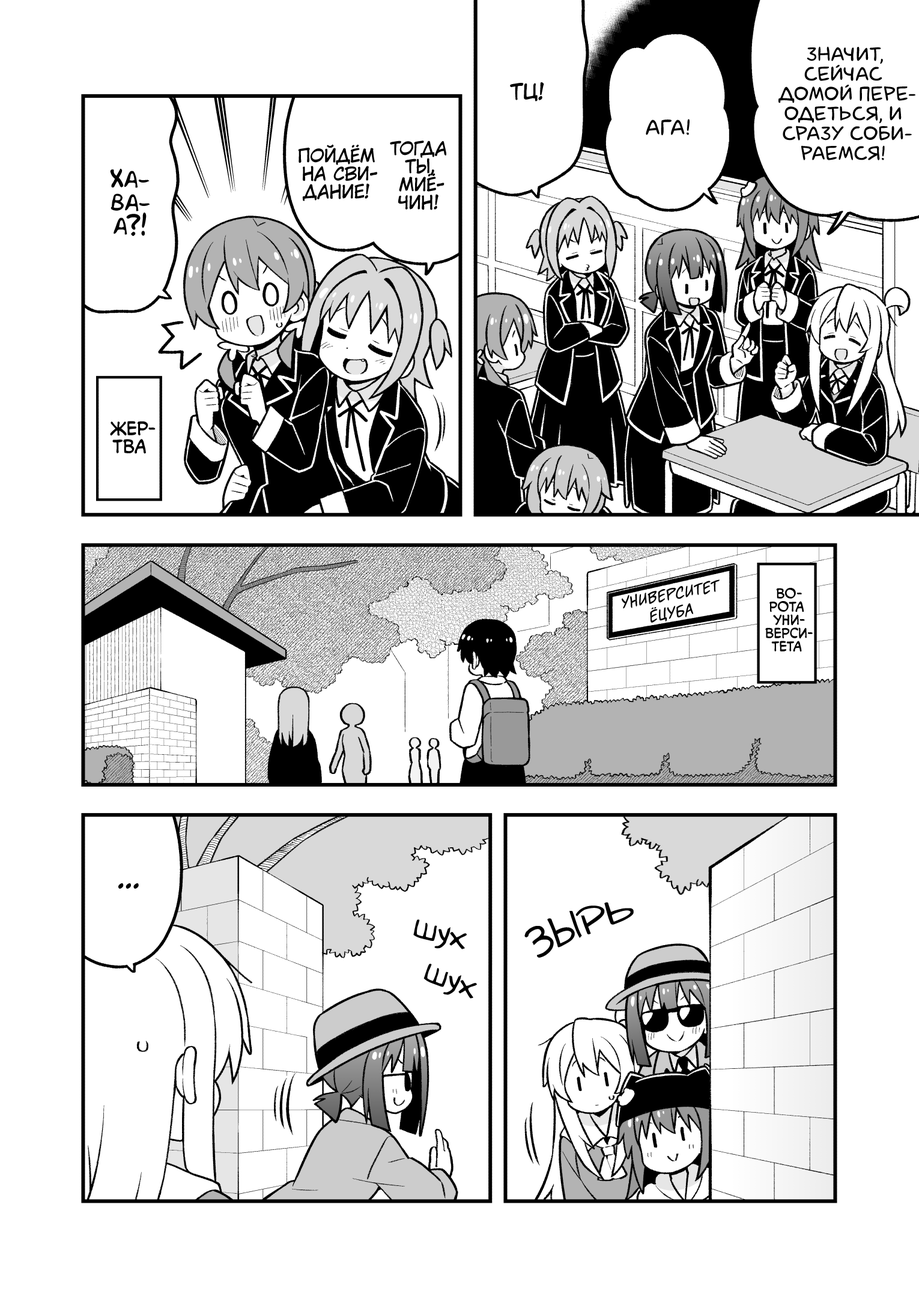
<style>
.page{position:relative;width:919px;height:1297px;background:#ffffff}
.page>*{position:absolute;margin:0}
.t1{font:19.8px "laCartoonerie";color:#000000;text-transform:uppercase}
.t2{font:21.6px "KuraiVoice2";color:#000000;text-transform:uppercase}
.t3{font:21.6px "laCartoonerie";color:#000000;text-transform:uppercase}
.t4{font:18px "KuraiVoice2";color:#000000;text-transform:uppercase}
.t5{font:23.4px "AkbarPlain";color:#000000}
.t6{font:18px "v_CCMonologous";color:#000000;text-transform:uppercase}
.t7{font:18.6px "v_MangaMasterBB";color:#000000;scale:0.97 1}
.t8{font:13.2px "v_CCMonologous";color:#000000;text-transform:uppercase}
.t9{font:28.8px "KuraiVoice2";color:#000000;text-transform:uppercase}
.t10{font:36px "v_Augie";color:#000000;text-transform:uppercase}
.t11{font:32.4px "v_Augie";color:#000000}
</style>
<div class="page">
<p class="t1" style="left:778px;top:46px;width:137px;height:114px;text-align:center">Значит,<br>сейчас<br>домой пере-<br>одеться, и<br>сразу соби-<br>раемся!</p>
<p class="t2" style="left:510px;top:82px;width:34px;height:20px">Тц!</p>
<p class="t3" style="left:646px;top:119px;width:44px;height:17px">Ага!</p>
<p class="t4" style="left:298px;top:144px;width:79px;height:57px;text-align:center">Пойдём<br>на сви-<br>дание!</p>
<p class="t4" style="left:390px;top:141px;width:56px;height:69px;text-align:center">Тогда<br>ты,<br>Миё-<br>чин!</p>
<p class="t5" style="left:110px;top:169px;width:40px;height:67px;text-align:center">Ха-<br>ва-<br>а?!</p>
<p class="t6" style="left:110px;top:421px;width:46px;height:33px;text-align:center">Жер-<br>тва</p>
<p class="t7" style="left:622px;top:580px;width:98px;height:43px;text-align:center;rotate:-10deg">Университет<br>Ёцуба</p>
<p class="t8" style="left:765px;top:588px;width:48px;height:64px;text-align:center">Во-<br>рота<br>уни-<br>верси-<br>тета</p>
<p class="t9" style="left:118px;top:884px;width:21px;height:5px">...</p>
<p class="t10" style="left:524px;top:902px;width:110px;height:56px;rotate:-21deg">зырь</p>
<p class="t11" style="left:413px;top:920px;width:54px;height:30px;rotate:16deg">шух</p>
<p class="t11" style="left:423px;top:964px;width:54px;height:35px;rotate:23deg">шух</p>
</div>
